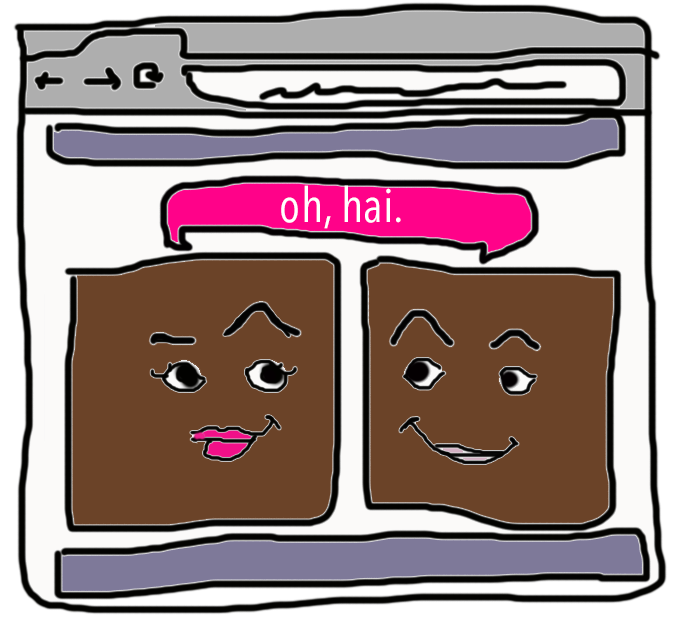
<style>
.page{position:relative;width:673px;height:630px;background:#6b4328}
.page>*{position:absolute;margin:0}
.t1{font:48px "AvenirNextCondensed-Regular";color:#ffffff}
</style>
<div class="page">
<p class="t1" style="left:281px;top:185px;width:120px;height:44px">oh, hai.</p>
</div>
